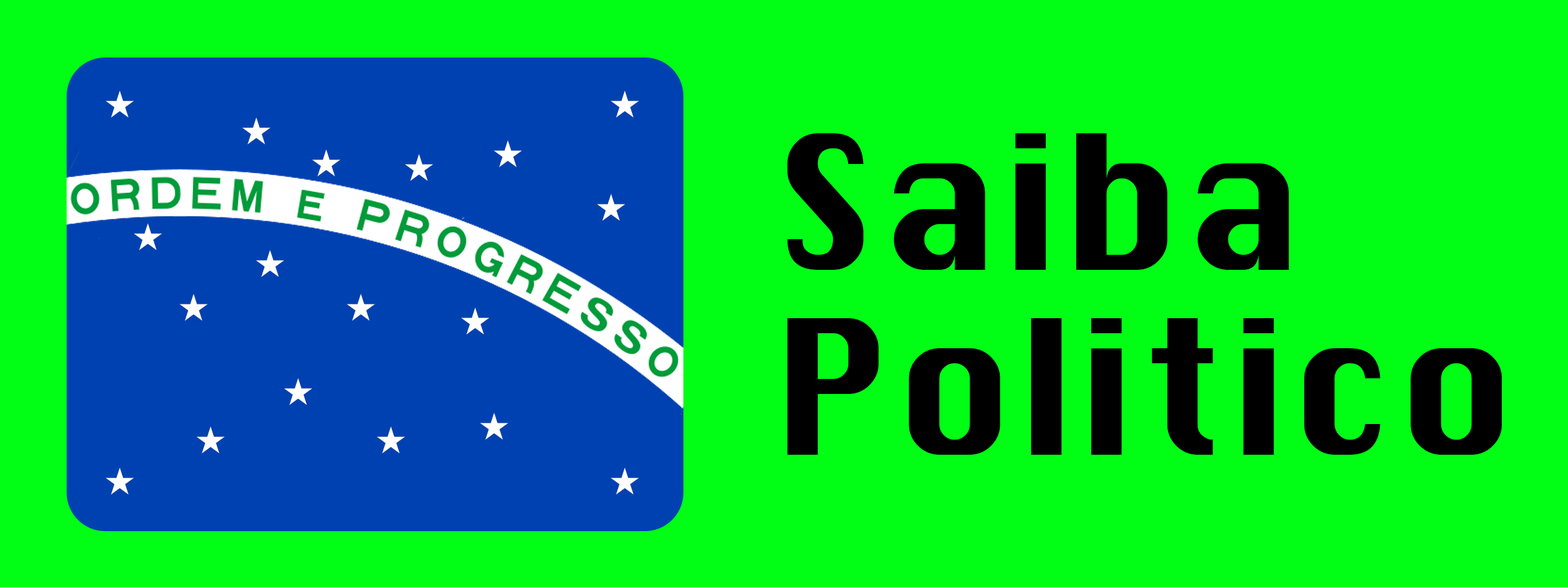
<style>
.page{position:relative;width:1568px;height:588px;background:#00ff15}
.page>*{position:absolute;margin:0}
.t1{font:182.4px "Silom";color:#000000}
</style>
<div class="page">
<p class="t1" style="left:787px;top:133px;width:502px;height:137px">Saiba</p>
<p class="t1" style="left:787px;top:318px;width:715px;height:137px">Politico</p>
</div>
